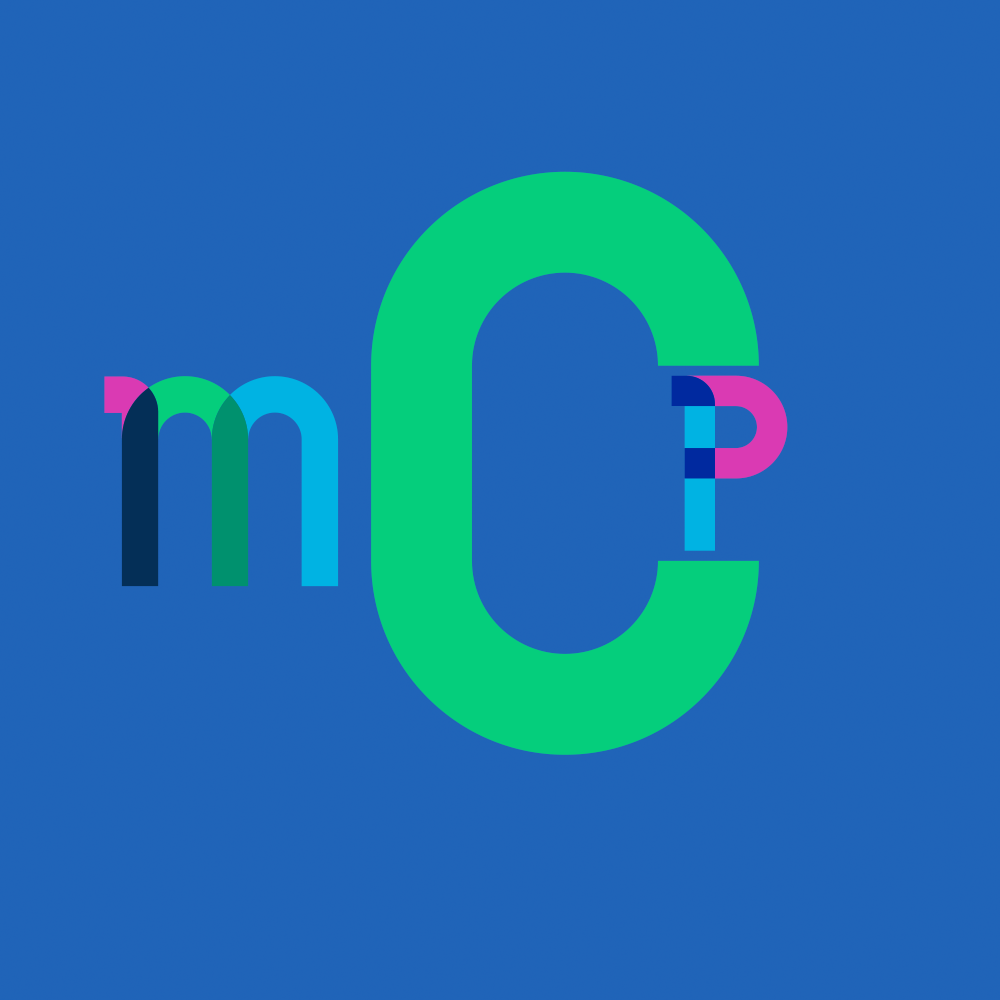
<style>
.page{position:relative;width:1000px;height:1000px;background:#2064b8}
.page>*{position:absolute;margin:0}
.t1{font:833.3px "GilbertColorBold";color:#05ce7c}
.t2{font:300px "GilbertColorBold"}
.t3{font:250px "GilbertColorBold"}
</style>
<div class="page">
<p class="t1" style="left:371px;top:171px;width:388px;height:584px">C</p>
<p class="t2" style="left:104px;top:376px;width:235px;height:211px">M</p>
<p class="t3" style="left:671px;top:375px;width:117px;height:176px">P</p>
</div>
